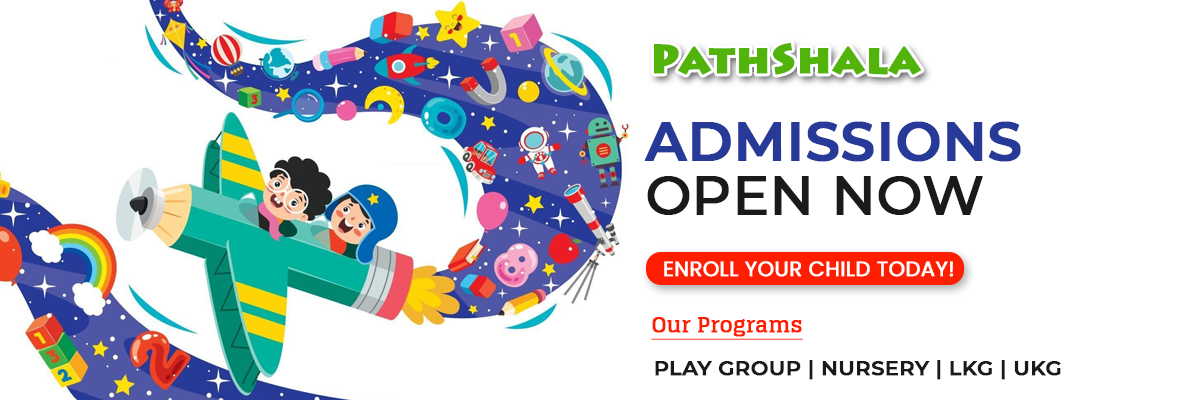
<style>
.page{position:relative;width:1200px;height:400px;background:#ffffff}
.page>*{position:absolute;margin:0}
.t1{font:41.7px "LithosPro-Black";color:#52b40b;font-weight:bold}
.t2{font:54.2px/54.2px "Montserrat-SemiBold";color:#273a98;font-weight:bold}
.t3{font:54.2px/54.2px "Montserrat-Medium";color:#1a1a1a;font-weight:bold}
.t4{font:20.8px "Poppins-Regular";color:#ffffff;font-weight:bold}
.t5{font:20.8px "Glegoo-Bold";color:#ff1e00;font-weight:bold;text-decoration:underline}
.t6{font:20.8px "Montserrat-SemiBold";color:#1a1a1a;text-transform:uppercase;font-weight:bold}
</style>
<div class="page">
<p class="t1" style="left:654px;top:43px;width:268px;height:32px">PathShala</p>
<p class="t2" style="left:644px;top:121px;width:377px;height:94px">ADMISSIONS<br><span class="t3">OPEN NOW</span></p>
<p class="t4" style="left:664px;top:261px;width:289px;height:16px">ENROLL YOUR CHILD TODAY!</p>
<p class="t5" style="left:651px;top:317px;width:152px;height:23px">Our Programs</p>
<p class="t6" style="left:655px;top:360px;width:406px;height:20px">play group | Nursery | LKG | UKG</p>
</div>
